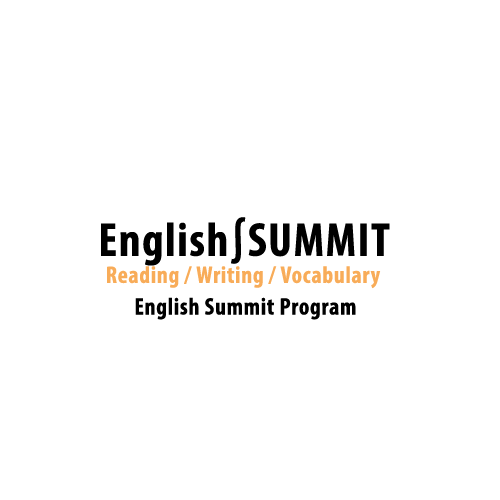
<style>
.page{position:relative;width:500px;height:500px;background:#ffffff}
.page>*{position:absolute;margin:0}
.t1{font:48px "MyriadPro-BoldCond";letter-spacing:0.03em;color:#000000}
.t2{font:24px "MyriadPro-BoldCond";letter-spacing:0.03em;color:#f8ac59}
.t3{font:24px "MyriadPro-BoldCond";letter-spacing:0.03em;color:#000000}
</style>
<div class="page">
<p class="t1" style="left:101px;top:217px;width:289px;height:49px">English∫SUMMIT</p>
<p class="t2" style="left:107px;top:266px;width:274px;height:23px">Reading / Writing / Vocabulary</p>
<p class="t3" style="left:135px;top:297px;width:221px;height:23px">English Summit Program</p>
</div>
